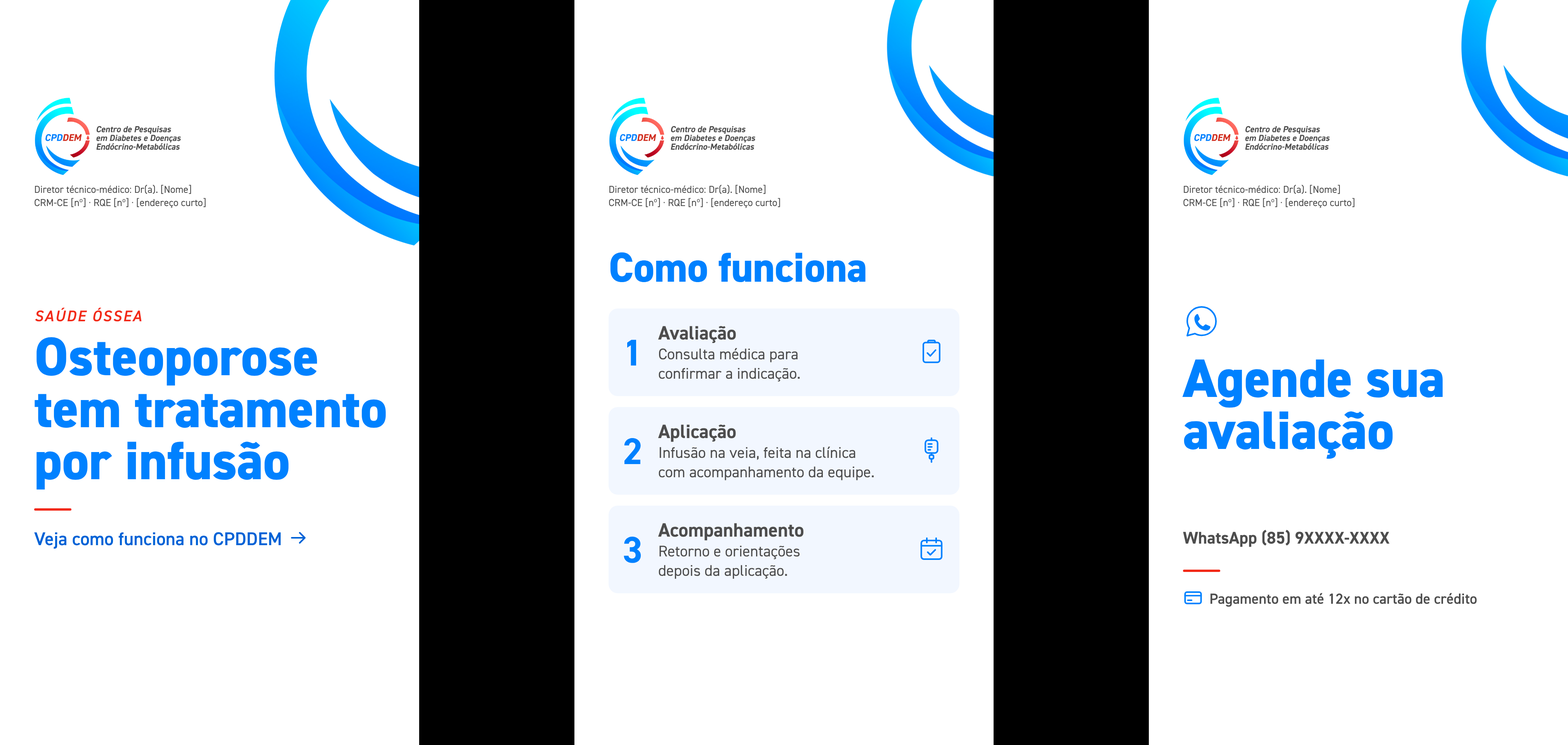
<style>
.page{position:relative;width:1568px;height:745px;background:#ffffff}
.page>*{position:absolute;margin:0}
.t1{font:10.1px/13.2px "DIN2014-Regular";color:#4d4d4d}
.t2{font:41.9px "DIN2014-ExtraBold";letter-spacing:-0.005em;color:#0081ff}
.t3{font:15.5px "DIN2014-DemiItalic";letter-spacing:0.08em;color:#f22a18}
.t4{font:19.4px "DIN2014-Bold";color:#4d4d4d}
.t5{font:54.3px/52px "DIN2014-ExtraBold";letter-spacing:-0.005em;color:#0081ff}
.t6{font:37.3px "DIN2014-Bold";color:#0081ff}
.t7{font:15.5px/19.4px "DIN2014-Regular";color:#4d4d4d}
.t8{font:18.6px "DIN2014-Demi";color:#0062d6}
.t9{font:17.1px "DIN2014-Bold";color:#4d4d4d}
.t10{font:14.7px "DIN2014-Demi";color:#4d4d4d}
</style>
<div class="page">
<p class="t1" style="left:35px;top:185px;width:171px;height:23px">Diretor técnico-médico: Dr(a). [Nome]<br>CRM-CE [nº] · RQE [nº] · [endereço curto]</p>
<p class="t1" style="left:609px;top:185px;width:171px;height:23px">Diretor técnico-médico: Dr(a). [Nome]<br>CRM-CE [nº] · RQE [nº] · [endereço curto]</p>
<p class="t1" style="left:1183px;top:185px;width:172px;height:23px">Diretor técnico-médico: Dr(a). [Nome]<br>CRM-CE [nº] · RQE [nº] · [endereço curto]</p>
<p class="t2" style="left:610px;top:252px;width:256px;height:30px">Como funciona</p>
<p class="t3" style="left:35px;top:308px;width:107px;height:14px">SAÚDE ÓSSEA</p>
<p class="t4" style="left:658px;top:326px;width:78px;height:17px">Avaliação</p>
<p class="t5" style="left:35px;top:337px;width:351px;height:153px">Osteoporose<br>tem tratamento<br>por infusão</p>
<p class="t6" style="left:627px;top:340px;width:9px;height:26px">1</p>
<p class="t7" style="left:659px;top:348px;width:141px;height:34px">Consulta médica para<br>confirmar a indicação.</p>
<p class="t5" style="left:1182px;top:359px;width:261px;height:100px">Agende sua<br>avaliação</p>
<p class="t4" style="left:658px;top:425px;width:78px;height:17px">Aplicação</p>
<p class="t6" style="left:624px;top:438px;width:17px;height:26px">2</p>
<p class="t7" style="left:659px;top:447px;width:215px;height:33px">Infusão na veia, feita na clínica<br>com acompanhamento da equipe.</p>
<p class="t8" style="left:34px;top:532px;width:247px;height:17px">Veja como funciona no CPDDEM</p>
<p class="t4" style="left:658px;top:523px;width:145px;height:18px">Acompanhamento</p>
<p class="t9" style="left:1183px;top:530px;width:206px;height:17px">WhatsApp (85) 9XXXX-XXXX</p>
<p class="t6" style="left:624px;top:537px;width:17px;height:26px">3</p>
<p class="t7" style="left:659px;top:546px;width:141px;height:33px">Retorno e orientações<br>depois da aplicação.</p>
<p class="t10" style="left:1210px;top:593px;width:267px;height:14px">Pagamento em até 12x no cartão de crédito</p>
</div>
